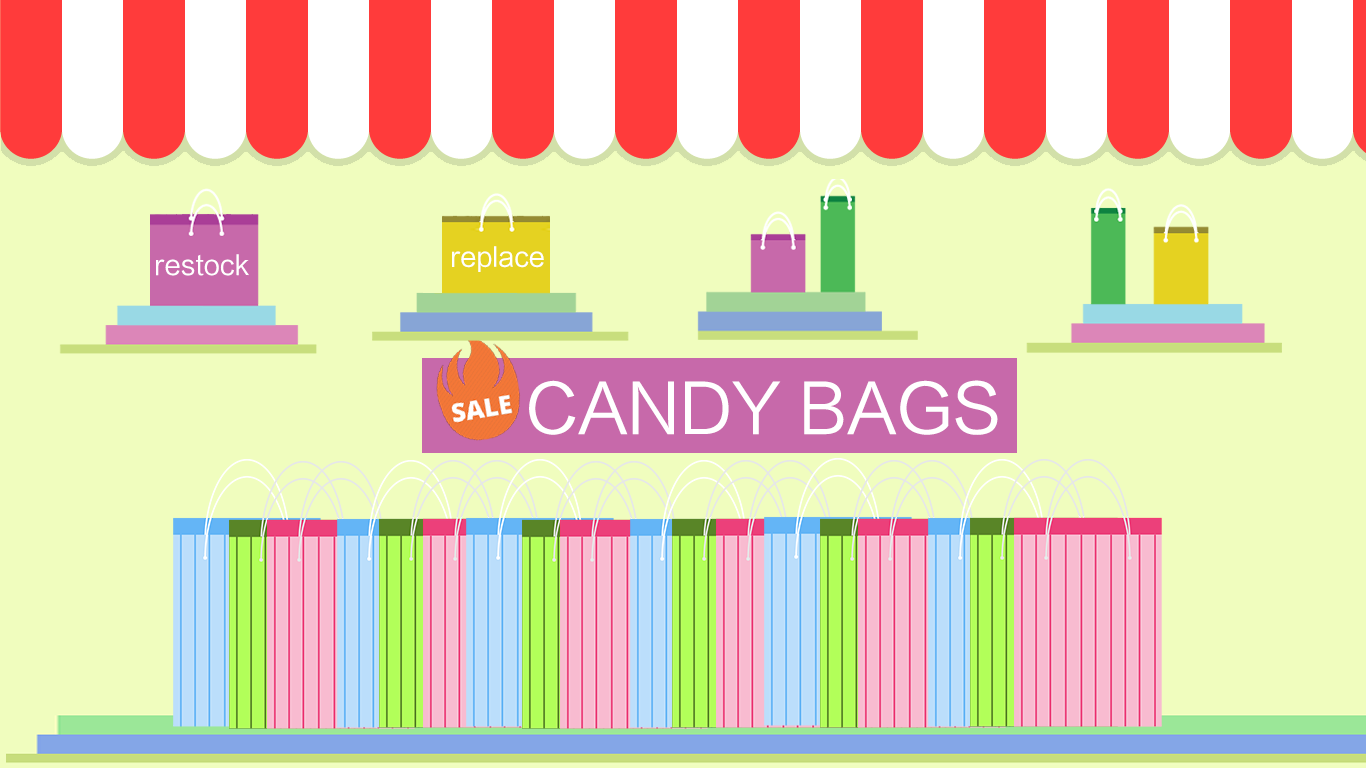
<style>
.page{position:relative;width:1366px;height:768px;background:#f0fdbe}
.page>*{position:absolute;margin:0}
.t1{font:26.3px "LTHYSZK";color:#ffffff}
.t2{font:26.6px "LTHYSZK";color:#ffffff}
.t3{font:66.7px "LTHYSZK";color:#ffffff}
</style>
<div class="page">
<p class="t1" style="left:452px;top:246px;width:92px;height:26px">replace</p>
<p class="t2" style="left:156px;top:254px;width:93px;height:22px">restock</p>
<p class="t3" style="left:529px;top:380px;width:469px;height:55px">CANDY BAGS</p>
</div>
